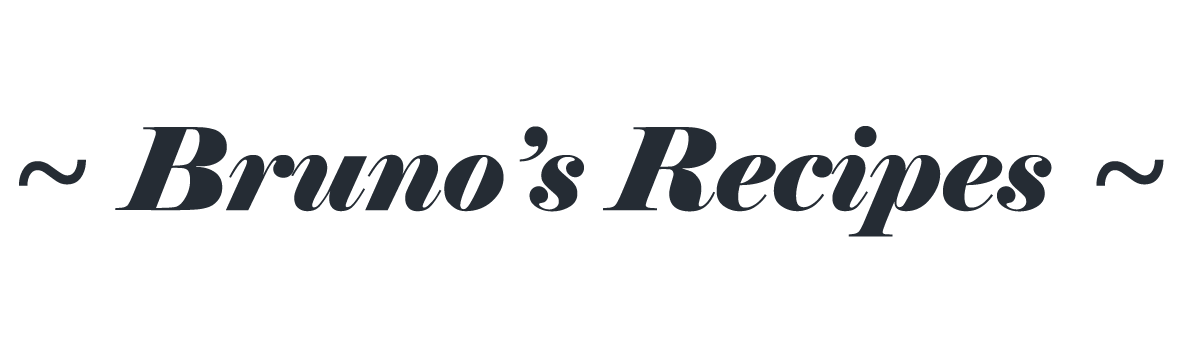
<style>
.page{position:relative;width:1181px;height:338px;background:#ffffff}
.page>*{position:absolute;margin:0}
.t1{font:113.6px "Elephant-Italic";color:#252c34}
</style>
<div class="page">
<p class="t1" style="left:19px;top:126px;width:1145px;height:111px">~ Bruno’s Recipes ~</p>
</div>
